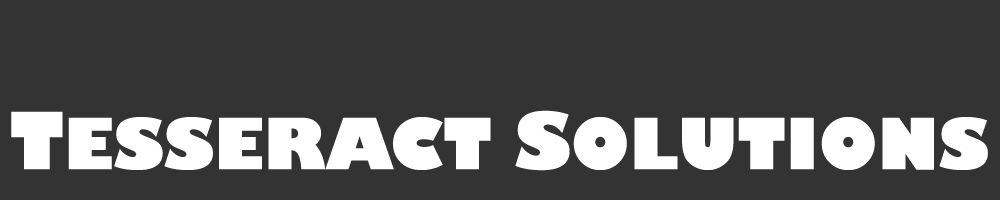
<style>
.page{position:relative;width:1000px;height:200px;background:#333333}
.page>*{position:absolute;margin:0}
.t1{font:68.8px "GillSans-UltraBold";color:#ffffff}
.t2{font:77px "GillSans-UltraBold";color:#ffffff}
</style>
<div class="page">
<p class="t1" style="left:11px;top:110px;width:977px;height:61px"><span class="t2">T</span>ESSERACT <span class="t2">S</span>OLUTIONS</p>
</div>
